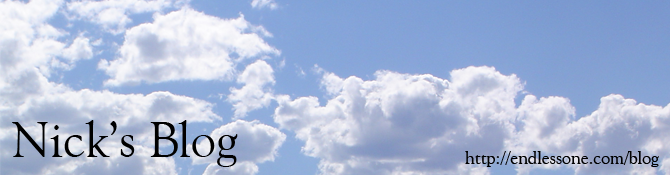
<style>
.page{position:relative;width:670px;height:175px}
.page>*{position:absolute;margin:0}
.t1{font:50px "GoudyOldStyleBT-Roman";color:#000000}
.t2{font:18px "GoudyOldStyleBT-Roman";color:#000000}
</style>
<div class="page">
<p class="t1" style="left:12px;top:120px;width:226px;height:47px">Nick’s Blog</p>
<p class="t2" style="left:465px;top:151px;width:194px;height:16px">http://endlessone.com/blog</p>
</div>
